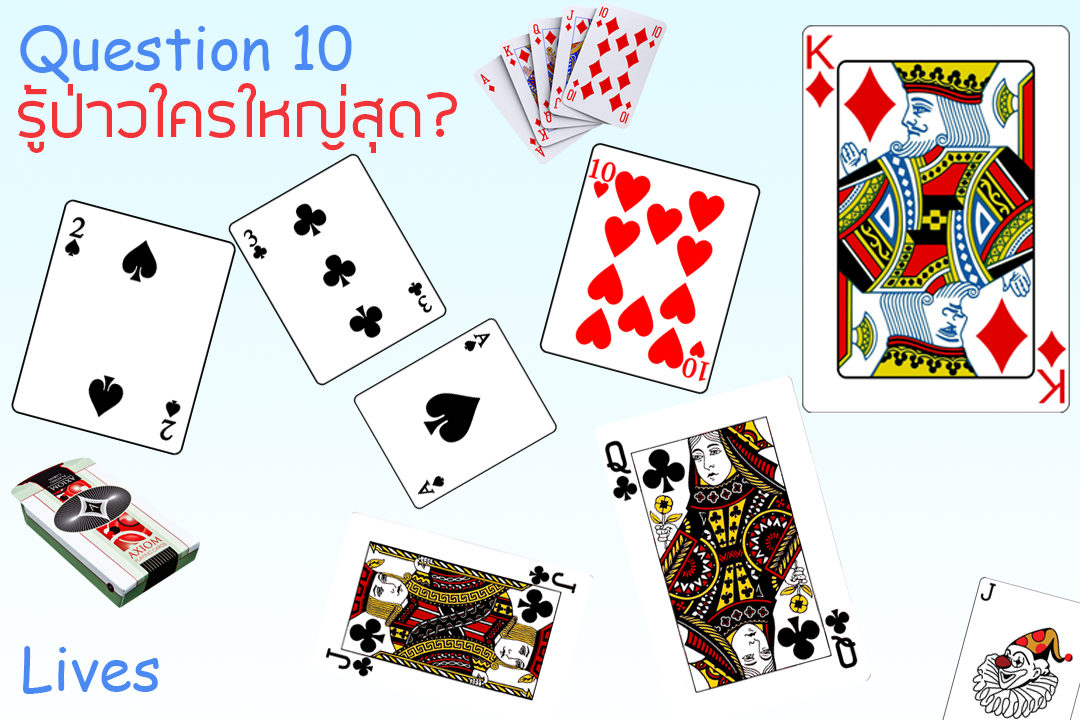
<style>
.page{position:relative;width:1080px;height:720px;background:#ffffff}
.page>*{position:absolute;margin:0}
.t1{font:60px "ComicSansMS";color:#4b8af2}
.t2{font:72px "SuperspaceRegular";color:#f23439}
.t3{font:59.6px "ComicSansMS";color:#4b8af2}
</style>
<div class="page">
<p class="t1" style="left:20px;top:25px;width:332px;height:58px">Question 10</p>
<p class="t2" style="left:18px;top:83px;width:439px;height:70px">รู้ป่าวใครใหญ่สุด?</p>
<p class="t3" style="left:23px;top:646px;width:136px;height:48px">Lives</p>
</div>
